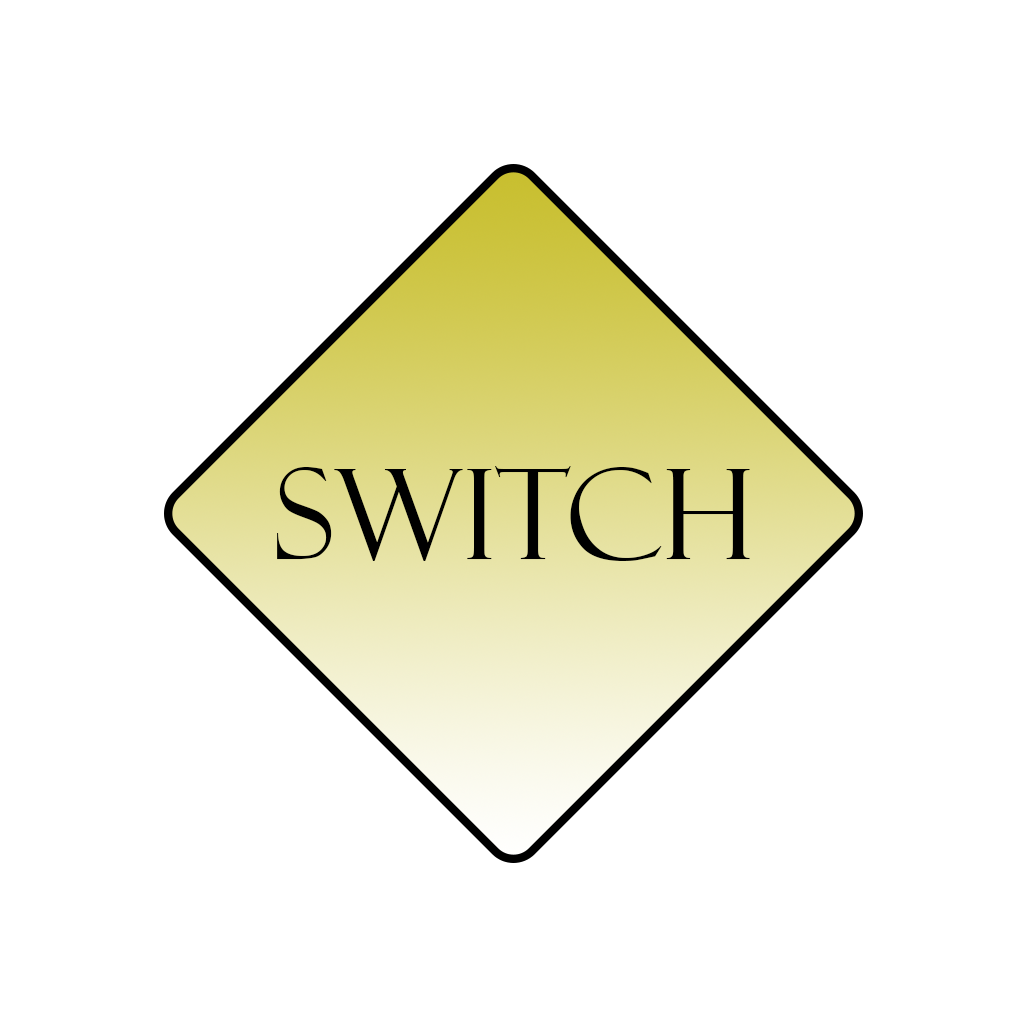
<style>
.page{position:relative;width:1028px;height:1028px;background:#ffffff}
.page>*{position:absolute;margin:0}
.t1{font:125px "FelixTitlingMT";color:#000000}
</style>
<div class="page">
<p class="t1" style="left:277px;top:466px;width:473px;height:95px">Switch</p>
</div>
